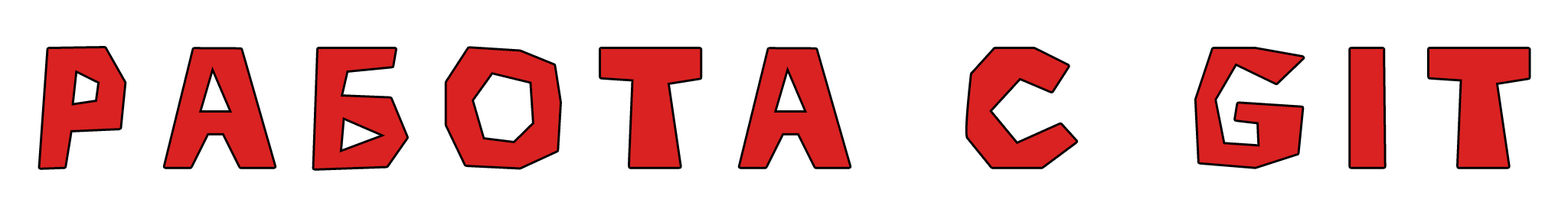
<style>
.page{position:relative;width:1568px;height:216px;background:#ffffff}
.page>*{position:absolute;margin:0}
.t1{font:171.7px "ZeroCool";letter-spacing:0.2em;color:#da2222}
</style>
<div class="page">
<p class="t1" style="left:40px;top:48px;width:1489px;height:120px">Работа с GIt</p>
</div>
